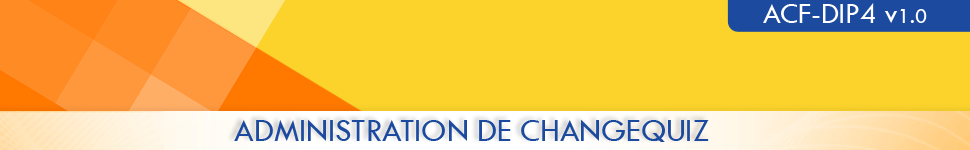
<style>
.page{position:relative;width:970px;height:150px;background:#fbd32b}
.page>*{position:absolute;margin:0}
.t1{font:29.7px "TwCenMT-Regular";color:#ffffff}
.t2{font:22.2px "TwCenMT-Regular";color:#ffffff}
.t3{font:32.6px "TwCenMT-Regular";color:#1b4a9f}
</style>
<div class="page">
<p class="t1" style="left:763px;top:3px;width:164px;height:20px">ACF-DIP4 v<span class="t2">1.0</span></p>
<p class="t3" style="left:234px;top:119px;width:475px;height:23px">ADMINISTRATION DE CHANGEQUIZ</p>
</div>
